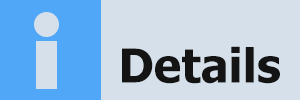
<style>
.page{position:relative;width:300px;height:100px;background:#d5e0ea}
.page>*{position:absolute;margin:0}
.t1{font:46.8px "Tahoma-Bold";color:#141414}
</style>
<div class="page">
<p class="t1" style="left:122px;top:46px;width:158px;height:38px">Details</p>
</div>
